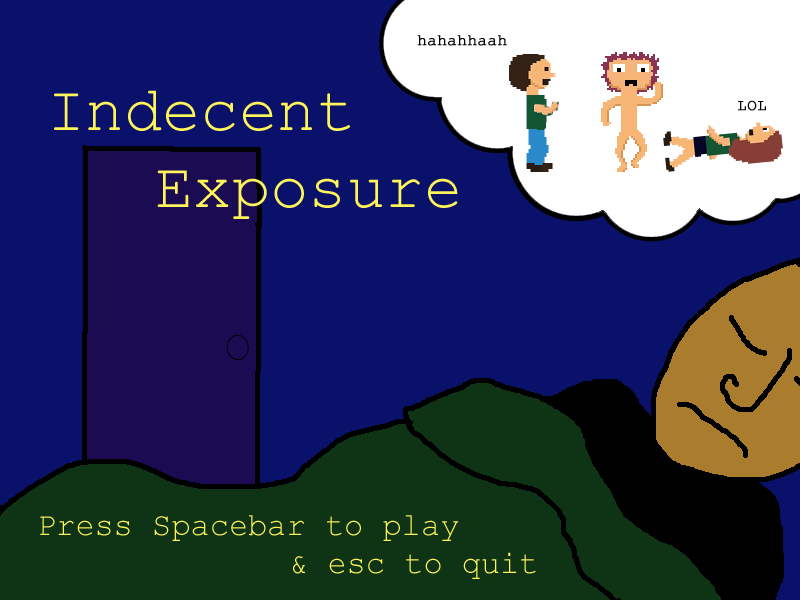
<style>
.page{position:relative;width:800px;height:600px;background:#0a116a}
.page>*{position:absolute;margin:0}
.t1{font:16px "CourierNewPSMT";color:#000000;font-weight:bold}
.t2{font:64px "CourierNewPSMT";color:#fff55a}
.t3{font:32px "CourierNewPSMT";color:#fff55a}
</style>
<div class="page">
<p class="t1" style="left:417px;top:35px;width:90px;height:11px">hahahhaah</p>
<p class="t2" style="left:54px;top:90px;width:404px;height:129px">Indecent<br>   Exposure</p>
<p class="t1" style="left:738px;top:100px;width:28px;height:11px">LOL</p>
<p class="t3" style="left:40px;top:515px;width:496px;height:64px">Press Spacebar to play<br>       &amp; esc to quit</p>
</div>
